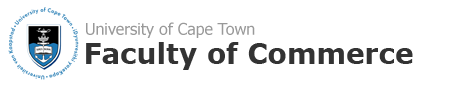
<style>
.page{position:relative;width:476px;height:90px;background:#ffffff}
.page>*{position:absolute;margin:0}
.t1{font:16px "Tahoma";color:#999999}
.t2{font:28px "Verdana-Bold";color:#333333}
</style>
<div class="page">
<p class="t1" style="left:86px;top:22px;width:169px;height:16px">University of Cape Town</p>
<p class="t2" style="left:86px;top:42px;width:327px;height:28px">Faculty of Commerce</p>
</div>
